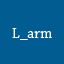
<style>
.page{position:relative;width:64px;height:64px;background:#005c91}
.page>*{position:absolute;margin:0}
.t1{font:15px "ChaparralPro-Regular";color:#ffffff}
</style>
<div class="page">
<p class="t1" style="left:12px;top:28px;width:40px;height:12px">L_arm</p>
</div>
